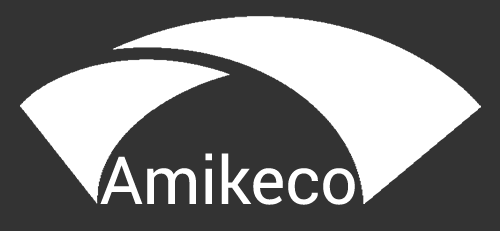
<style>
.page{position:relative;width:500px;height:231px;background:#333333}
.page>*{position:absolute;margin:0}
.t1{font:66px "Roboto-Regular";color:#ffffff}
</style>
<div class="page">
<p class="t1" style="left:100px;top:153px;width:255px;height:52px">Amikeco</p>
</div>
